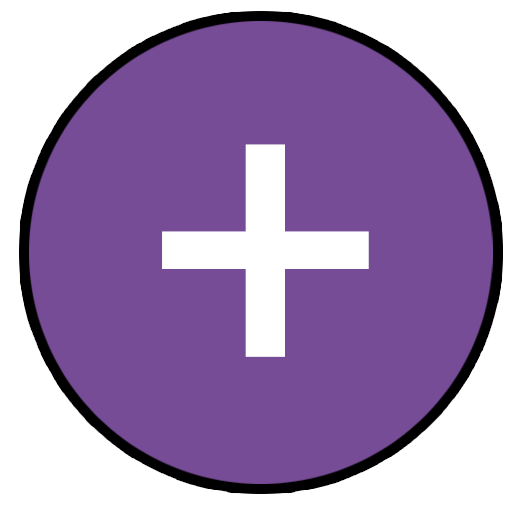
<style>
.page{position:relative;width:512px;height:512px;background:#774c97}
.page>*{position:absolute;margin:0}
.t1{font:399.1px "MyriadPro-Bold";color:#ffffff}
</style>
<div class="page">
<p class="t1" style="left:162px;top:144px;width:207px;height:213px">+</p>
</div>
